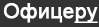
<style>
.page{position:relative;width:99px;height:27px;background:#333333}
.page>*{position:absolute;margin:0}
.t1{font:21px "ArialMT";color:#fffefe;font-weight:bold}
.t2{font:21px "ArialMT";color:#fffefe;font-weight:bold;text-decoration:underline}
</style>
<div class="page">
<p class="t1" style="left:3px;top:3px;width:95px;height:20px">Офице<span class="t2">ру</span></p>
</div>
